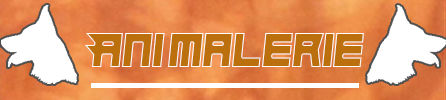
<style>
.page{position:relative;width:446px;height:100px}
.page>*{position:absolute;margin:0}
.t1{font:50px "Hindsight2020";color:#bb700d;scale:0.94 1}
</style>
<div class="page">
<p class="t1" style="left:85px;top:33px;width:80px;height:34px">Ani</p>
<p class="t1" style="left:168px;top:33px;width:196px;height:34px">malerie</p>
</div>
